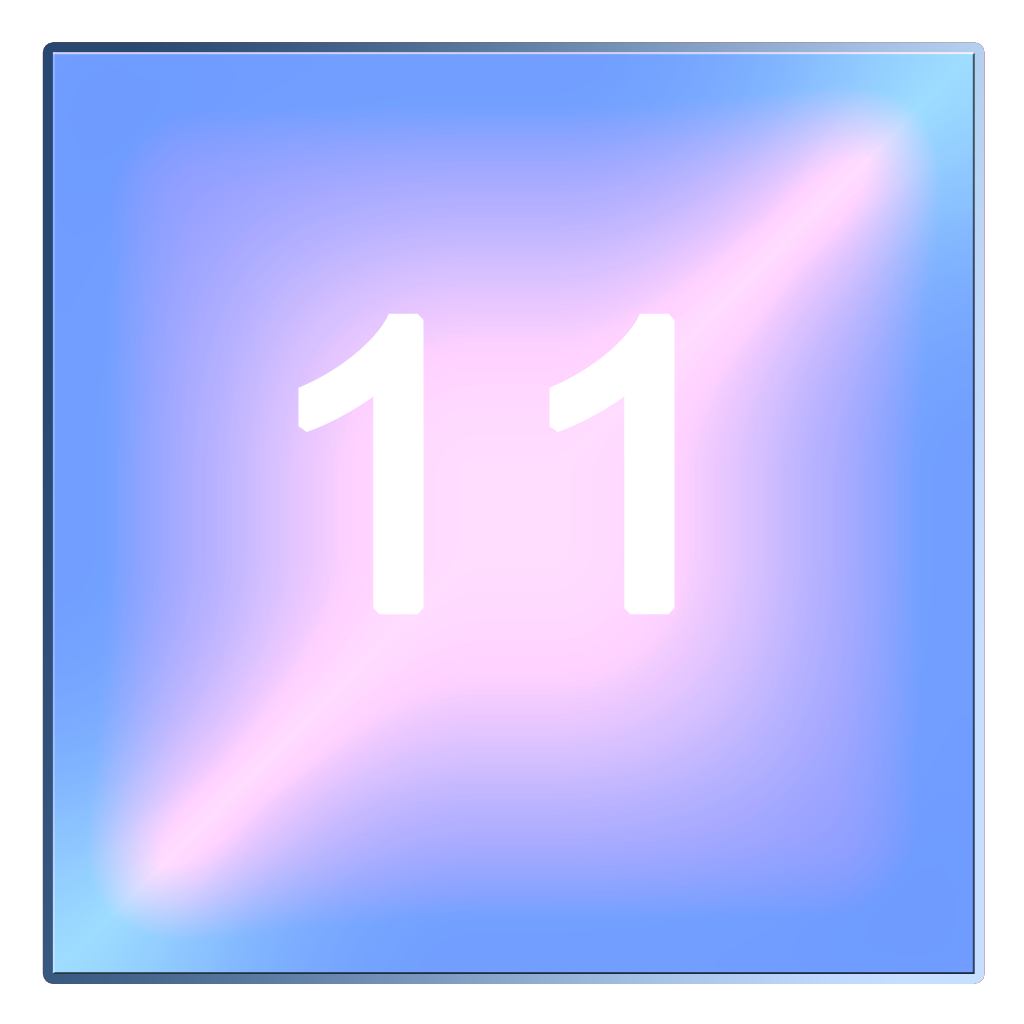
<style>
.page{position:relative;width:1024px;height:1024px}
.page>*{position:absolute;margin:0}
.t1{font:400px "ArialNarrow";color:#ffffff;font-weight:bold;scale:1.3 1}
</style>
<div class="page">
<p class="t1" style="left:298px;top:313px;width:377px;height:302px">11</p>
</div>
